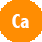
<style>
.page{position:relative;width:42px;height:42px;background:#ff8d02}
.page>*{position:absolute;margin:0}
.t1{font:20px "AbadiMT-CondensedExtraBold";color:#ffffff}
</style>
<div class="page">
<p class="t1" style="left:12px;top:14px;width:17px;height:14px">Ca</p>
</div>
